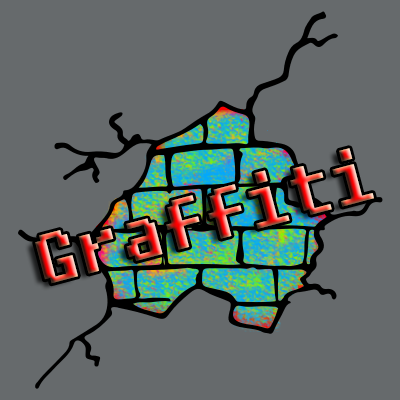
<style>
.page{position:relative;width:400px;height:400px;background:#666a6c}
.page>*{position:absolute;margin:0}
.t1{font:70px "Fixedsys"}
</style>
<div class="page">
<p class="t1" style="left:35px;top:148px;width:339px;height:136px;rotate:-15deg">Graffiti</p>
</div>
